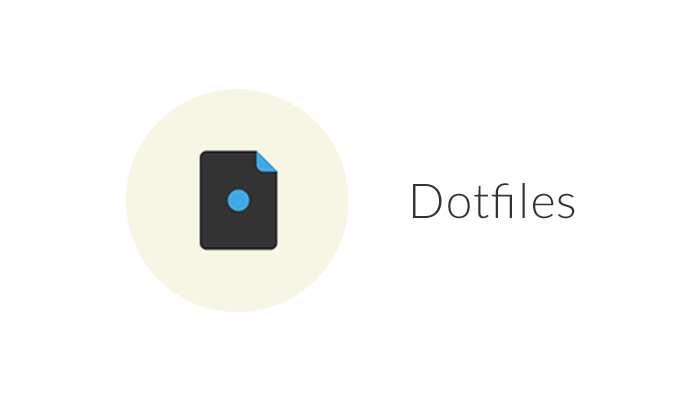
<style>
.page{position:relative;width:700px;height:400px;background:#ffffff}
.page>*{position:absolute;margin:0}
.t1{font:48px "Lato-Light";letter-spacing:0.025em;color:#333333}
</style>
<div class="page">
<p class="t1" style="left:413px;top:183px;width:162px;height:36px">Dotfiles</p>
</div>
